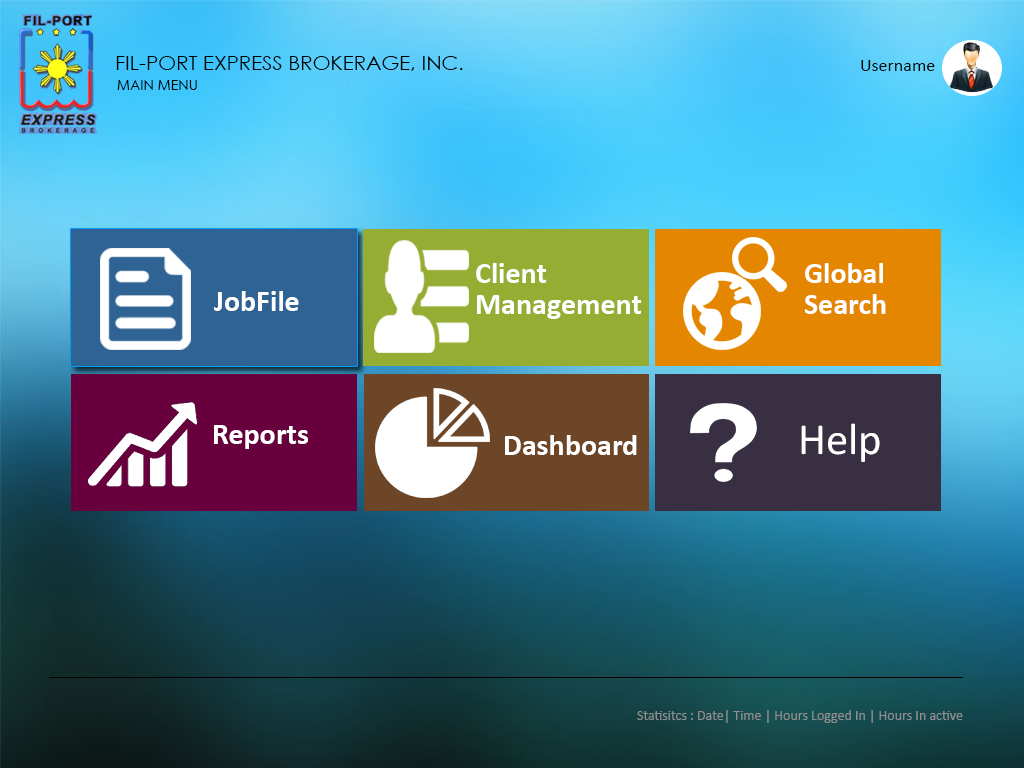
<style>
.page{position:relative;width:1024px;height:768px}
.page>*{position:absolute;margin:0}
.t1{font:20.3px "CenturyGothic";color:#000000;text-transform:uppercase}
.t2{font:18px/30.5px "Calibri";color:#000000}
.t3{font:13.7px "CenturyGothic";color:#000000;text-transform:uppercase}
.t4{font:30px/30.5px "Calibri-Bold";color:#ffffff}
.t5{font:30px "Calibri-Bold";color:#ffffff}
.t6{font:44.5px "Calibri";color:#ffffff}
.t7{font:14px "Calibri";color:#8e8e8e}
</style>
<div class="page">
<p class="t1" style="left:116px;top:56px;width:347px;height:15px">FIL-PORT EXPRESS BROKERAGE, INC.</p>
<p class="t2" style="left:861px;top:60px;width:74px;height:11px">Username<br>vvvvv</p>
<p class="t3" style="left:117px;top:80px;width:80px;height:10px">Main Menu</p>
<p class="t4" style="left:476px;top:263px;width:166px;height:56px">Client <br>Management</p>
<p class="t4" style="left:804px;top:263px;width:82px;height:51px">Global <br>Search</p>
<p class="t5" style="left:214px;top:291px;width:85px;height:20px">JobFile</p>
<p class="t5" style="left:214px;top:425px;width:94px;height:24px">Reports</p>
<p class="t6" style="left:801px;top:423px;width:79px;height:39px">Help</p>
<p class="t5" style="left:505px;top:435px;width:132px;height:20px">Dashboard</p>
<p class="t7" style="left:637px;top:710px;width:326px;height:13px">Statisitcs : Date| Time | Hours Logged In | Hours In active</p>
</div>
